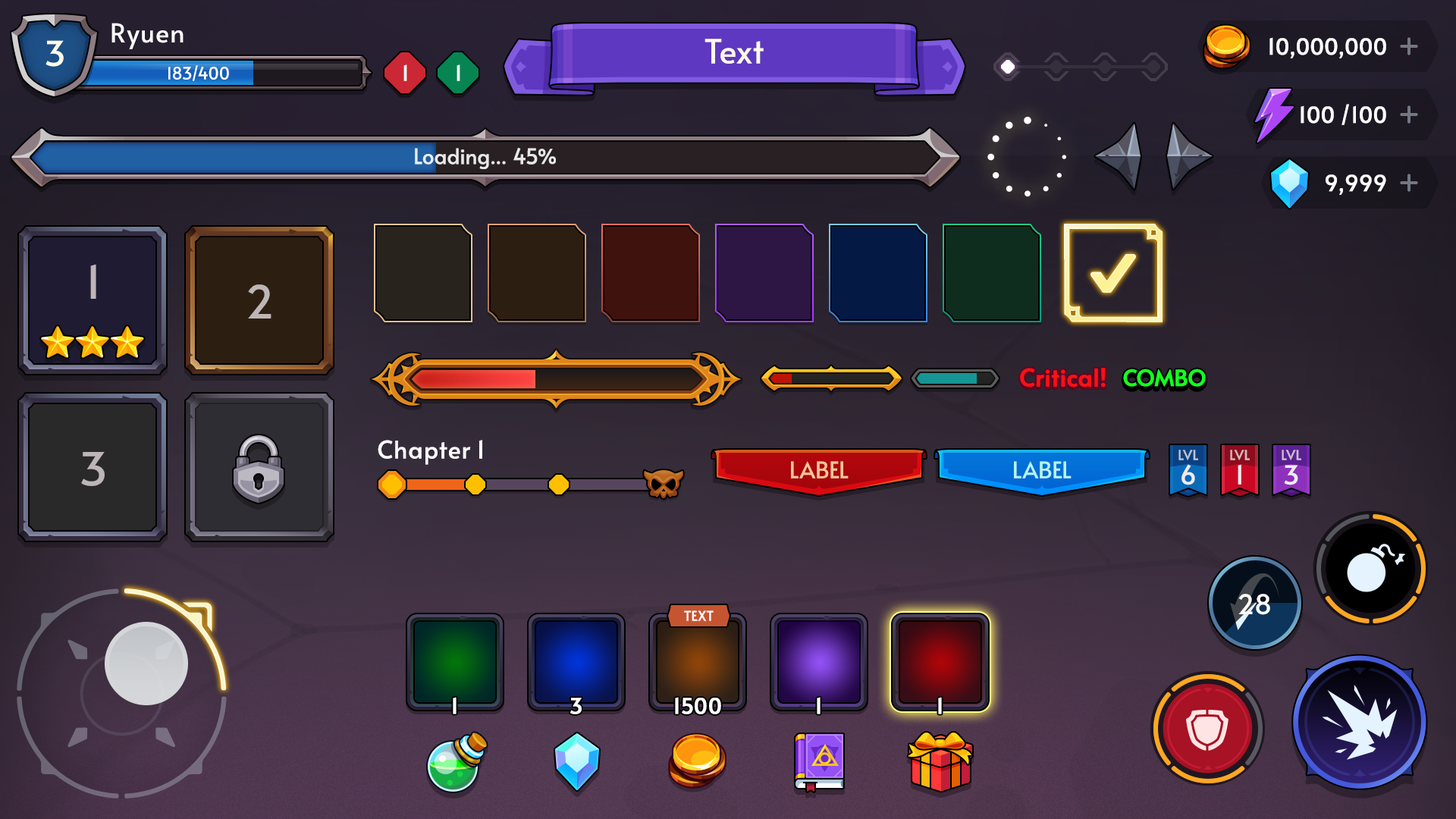
<style>
.page{position:relative;width:1456px;height:819px}
.page>*{position:absolute;margin:0}
.t1{font:26px "Alata-Regular";color:#ffffff}
.t2{font:34.5px "Alata-Regular";color:#fbfde7}
.t3{font:33.4px "Alata-Regular";color:#fff8e6}
.t4{font:21.9px "Alata-Regular";letter-spacing:-0.025em;color:#ffffff;font-weight:bold}
.t5{font:16.7px "Alata-Regular";color:#ffffff}
.t6{font:21.2px "Alata-Regular";color:#ffffff}
.t7{font:21.2px "Alata-Regular";letter-spacing:0.01em;color:#ffffff}
.t8{font:45.5px "Alata-Regular";color:#beb5b6}
.t9{font:23.7px "Alata-Regular";font-weight:bold}
.t10{font:23.7px "Alata-Regular";color:#fe1015;font-weight:bold}
.t11{font:21.8px "Alata-Regular";color:#15ff20;font-weight:bold}
.t12{font:21.8px "Alata-Regular";font-weight:bold}
.t13{font:24.3px "Alata-Regular";color:#ffffff}
.t14{font:13.6px "Alata-Regular";letter-spacing:-0.01em;color:#b9c2d3;text-transform:uppercase}
.t15{font:13.6px "Alata-Regular";letter-spacing:-0.01em;color:#d6b9bc;text-transform:uppercase}
.t16{font:13.6px "Alata-Regular";letter-spacing:-0.01em;color:#c8bcd8;text-transform:uppercase}
.t17{font:22.7px "Alata-Regular";color:#ffc69c;text-transform:uppercase}
.t18{font:22.7px "Alata-Regular";color:#b6f5ff;text-transform:uppercase}
.t19{font:25.8px "Alata-Regular";letter-spacing:-0.01em;color:#eeeced;text-transform:uppercase}
.t20{font:27.3px "Alata-Regular";color:#ffffff}
.t21{font:13.6px "Alata-Regular";color:#ffffff;text-transform:uppercase}
.t22{font:21.2px "Alata-Regular";letter-spacing:0.02em;color:#ffffff;font-weight:bold}
</style>
<div class="page">
<p class="t1" style="left:111px;top:23px;width:73px;height:26px">Ryuen</p>
<p class="t2" style="left:45px;top:40px;width:19px;height:27px">3</p>
<p class="t3" style="left:704px;top:39px;width:60px;height:25px">Text</p>
<p class="t4" style="left:1269px;top:37px;width:117px;height:21px">10,000,000</p>
<p class="t5" style="left:168px;top:65px;width:61px;height:16px">183/400</p>
<p class="t6" style="left:403px;top:64px;width:4px;height:17px">1</p>
<p class="t6" style="left:457px;top:64px;width:3px;height:17px">1</p>
<p class="t4" style="left:1301px;top:104px;width:85px;height:21px">100 /100</p>
<p class="t7" style="left:415px;top:147px;width:141px;height:22px;opacity:0.85">Loading... 45%</p>
<p class="t4" style="left:1326px;top:174px;width:60px;height:21px">9,999</p>
<p class="t8" style="left:90px;top:264px;width:6px;height:35px">1</p>
<p class="t8" style="left:248px;top:284px;width:23px;height:34px">2</p>
<p class="t9" style="left:1020px;top:369px;width:86px;height:20px">Critical!</p>
<p class="t10" style="left:1020px;top:368px;width:86px;height:20px">Critical!</p>
<p class="t11" style="left:1123px;top:369px;width:83px;height:19px">COMBO</p>
<p class="t11" style="left:1123px;top:370px;width:83px;height:18px">COMBO</p>
<p class="t12" style="left:1123px;top:371px;width:83px;height:18px">COMBO</p>
<p class="t11" style="left:1123px;top:369px;width:83px;height:18px">COMBO</p>
<p class="t13" style="left:378px;top:440px;width:104px;height:25px">Chapter 1</p>
<p class="t14" style="left:1178px;top:450px;width:20px;height:10px">lvl</p>
<p class="t15" style="left:1230px;top:450px;width:20px;height:10px">lvl</p>
<p class="t16" style="left:1282px;top:450px;width:19px;height:10px">lvl</p>
<p class="t8" style="left:81px;top:452px;width:24px;height:34px">3</p>
<p class="t17" style="left:791px;top:461px;width:58px;height:18px">Label</p>
<p class="t18" style="left:1014px;top:461px;width:58px;height:18px">Label</p>
<p class="t19" style="left:1181px;top:464px;width:14px;height:21px">6</p>
<p class="t19" style="left:1238px;top:464px;width:3px;height:21px">1</p>
<p class="t19" style="left:1284px;top:465px;width:14px;height:20px">3</p>
<p class="t20" style="left:1238px;top:594px;width:32px;height:21px">28</p>
<p class="t21" style="left:684px;top:610px;width:30px;height:11px">Text</p>
<p class="t22" style="left:453px;top:697px;width:4px;height:17px">1</p>
<p class="t22" style="left:570px;top:698px;width:12px;height:16px">3</p>
<p class="t22" style="left:675px;top:697px;width:46px;height:17px">1500</p>
<p class="t22" style="left:817px;top:697px;width:4px;height:17px">1</p>
<p class="t22" style="left:938px;top:697px;width:4px;height:17px">1</p>
</div>
